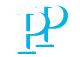
<style>
.page{position:relative;width:80px;height:57px;background:#ffffff}
.page>*{position:absolute;margin:0}
.t1{font:60px "Georgia"}
</style>
<div class="page">
<p class="t1" style="left:35px;top:5px;width:33px;height:42px">P</p>
<p class="t1" style="left:17px;top:12px;width:33px;height:42px">P</p>
</div>
